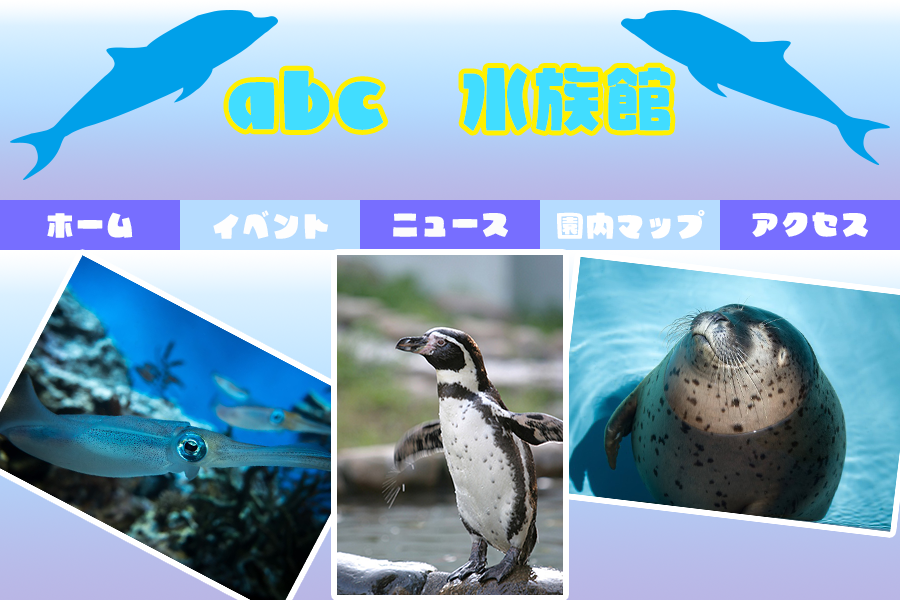
<style>
.page{position:relative;width:900px;height:600px}
.page>*{position:absolute;margin:0}
.t1{font:72px "AB-j_gu";color:#41ddff}
.t2{font:30px "AB-j_gu";color:#fefefe}
.t3{font:30px "AB-j_gu";color:#fcfcfc}
.t4{font:30px "AB-j_gu";color:#ffffff}
</style>
<div class="page">
<p class="t1" style="left:228px;top:67px;width:443px;height:64px">abc　水族館</p>
<p class="t2" style="left:47px;top:212px;width:86px;height:26px">ホーム</p>
<p class="t2" style="left:213px;top:210px;width:115px;height:29px">イベント</p>
<p class="t3" style="left:393px;top:213px;width:115px;height:24px">ニュース</p>
<p class="t4" style="left:557px;top:210px;width:148px;height:29px">園内マップ</p>
<p class="t4" style="left:752px;top:212px;width:116px;height:25px">アクセス</p>
</div>
